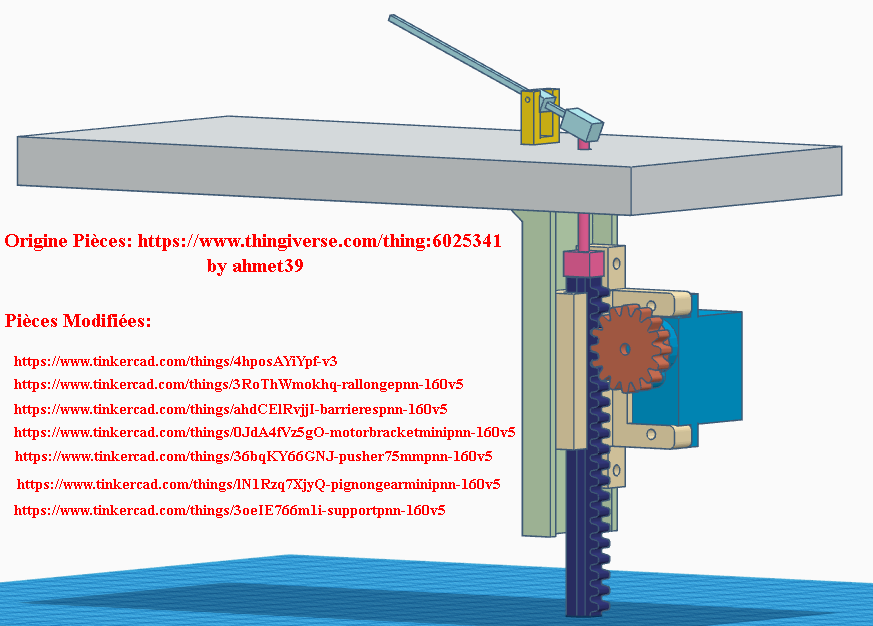
<style>
.page{position:relative;width:873px;height:626px;background:#fafafa}
.page>*{position:absolute;margin:0}
.t1{font:20px/4.2px "TimesNewRomanPS-BoldMT";color:#ff0000}
.t2{font:12px "TimesNewRomanPS-BoldMT";color:#ff0000}
.t3{font:15px "TimesNewRomanPS-BoldMT";color:#ff0000}
</style>
<div class="page">
<p class="t1" style="left:5px;top:234px;width:496px;height:42px;text-align:center">Origine Pièces: https://www.thingiverse.com/thing:6025341<br><br><br><br><br><br> by ahmet39</p>
<p class="t2" style="left:5px;top:314px;width:145px;height:13px">Pièces Modifiées:</p>
<p class="t3" style="left:14px;top:356px;width:323px;height:13px">https://www.tinkercad.com/things/4hposAYiYpf-v3</p>
<p class="t3" style="left:14px;top:379px;width:449px;height:13px">https://www.tinkercad.com/things/3RoThWmokhq-rallongepnn-160v5</p>
<p class="t3" style="left:14px;top:404px;width:433px;height:13px">https://www.tinkercad.com/things/ahdCElRvjjI-barrierespnn-160v5</p>
<p class="t3" style="left:14px;top:427px;width:501px;height:13px">https://www.tinkercad.com/things/0JdA4fVz5gO-motorbracketminipnn-160v5</p>
<p class="t3" style="left:15px;top:451px;width:477px;height:13px">https://www.tinkercad.com/things/36bqKY66GNJ-pusher75mmpnn-160v5</p>
<p class="t3" style="left:17px;top:479px;width:483px;height:13px">https://www.tinkercad.com/things/lN1Rzq7XjyQ-pignongearminipnn-160v5</p>
<p class="t3" style="left:14px;top:505px;width:431px;height:13px">https://www.tinkercad.com/things/3oeIE766m1i-supportpnn-160v5</p>
</div>
